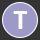
<style>
.page{position:relative;width:40px;height:40px;background:#9e9ac8}
.page>*{position:absolute;margin:0}
.t1{font:28px "Calibri-Bold";color:#ffffff}
</style>
<div class="page">
<p class="t1" style="left:13px;top:11px;width:15px;height:18px">T</p>
</div>
